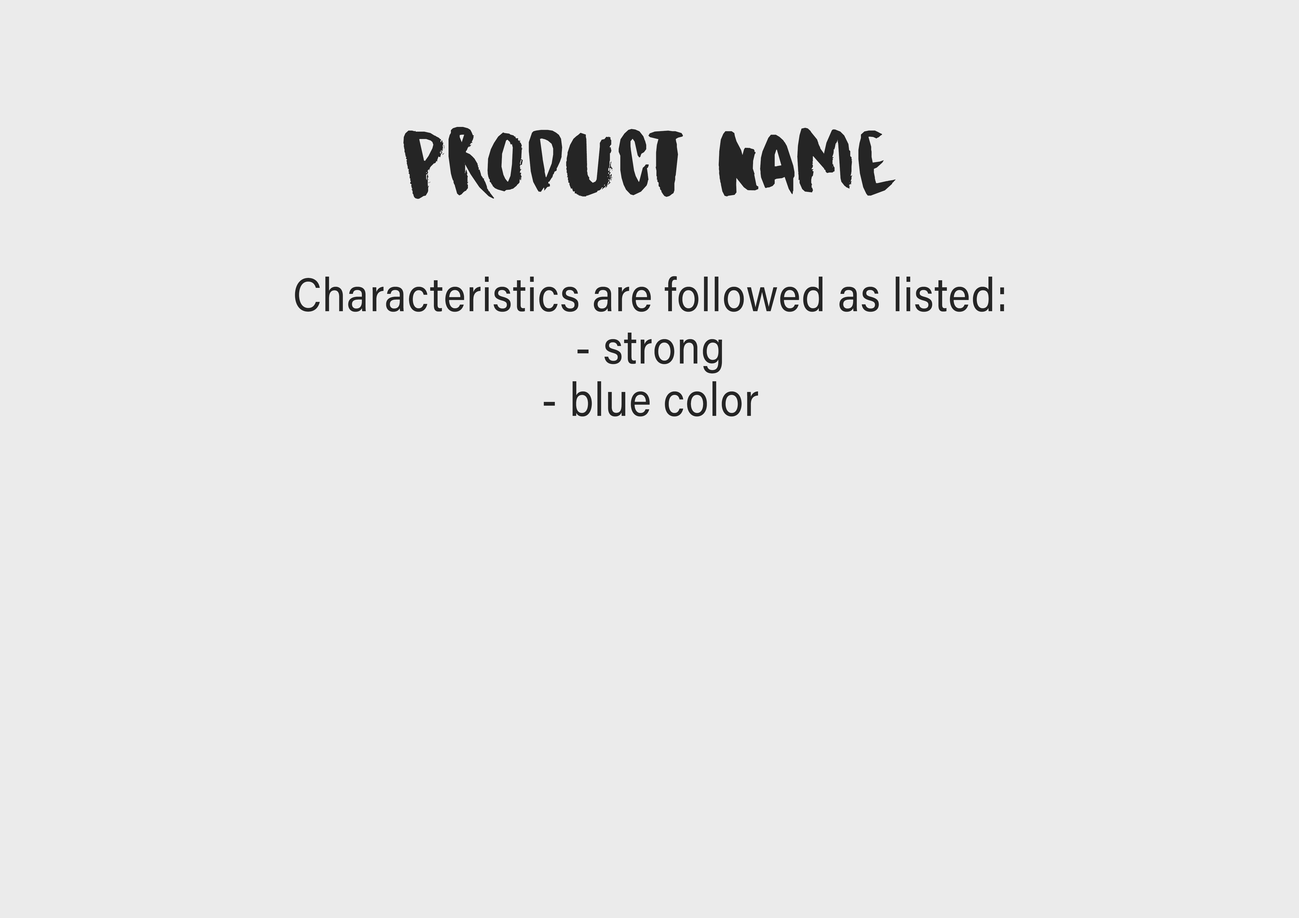
<style>
.page{position:relative;width:1299px;height:918px;background:#ebebeb}
.page>*{position:absolute;margin:0}
.t1{font:91.9px "DKKitsuneTail-Regular";letter-spacing:0.02em;color:#252525;scale:1.11 1}
.t2{font:47.1px/52.4px "AcuminConcept-Regular";letter-spacing:0.02em;color:#252525;scale:0.89 1}
</style>
<div class="page">
<p class="t1" style="left:403px;top:127px;width:492px;height:72px">Product name</p>
<p class="t2" style="left:295px;top:276px;width:709px;height:141px;text-align:center">Characteristics are followed as listed:<br>- strong<br>- blue color</p>
</div>
